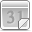
<style>
.page{position:relative;width:32px;height:32px;background:#ffffff}
.page>*{position:absolute;margin:0}
.t1{font:18px "TimesNewRomanPSMT";color:#9d9d9d;font-weight:bold}
</style>
<div class="page">
<p class="t1" style="left:7px;top:10px;width:17px;height:14px">31</p>
</div>
